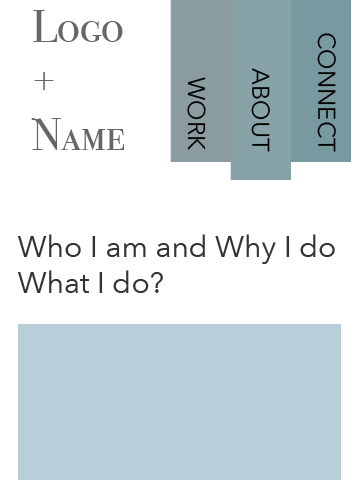
<style>
.page{position:relative;width:360px;height:480px;background:#ffffff}
.page>*{position:absolute;margin:0}
.t1{font:45px "BodoniSvtyTwoSCITCTTBook";color:#666666}
.t2{font:24px "AvenirNext-Regular";color:#000000}
.t3{font:30px "AvenirNext-Regular";color:#333333}
</style>
<div class="page">
<p class="t1" style="left:31px;top:10px;width:94px;height:140px">Logo<br>+<br>Name</p>
<p class="t2" style="left:317px;top:33px;width:19px;height:119px;rotate:90deg">CONNECT</p>
<p class="t2" style="left:187px;top:77px;width:19px;height:73px;rotate:90deg">WORK</p>
<p class="t2" style="left:251px;top:68px;width:19px;height:84px;rotate:90deg">ABOUT</p>
<p class="t3" style="left:17px;top:234px;width:318px;height:59px">Who I am and Why I do What I do?</p>
</div>
